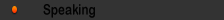
<style>
.page{position:relative;width:224px;height:20px;background:#333333}
.page>*{position:absolute;margin:0}
.t1{font:14.9px "ArialRoundedMTBold";color:#030303;scale:0.78 1}
</style>
<div class="page">
<p class="t1" style="left:43px;top:4px;width:52px;height:14px">Speaking</p>
</div>
